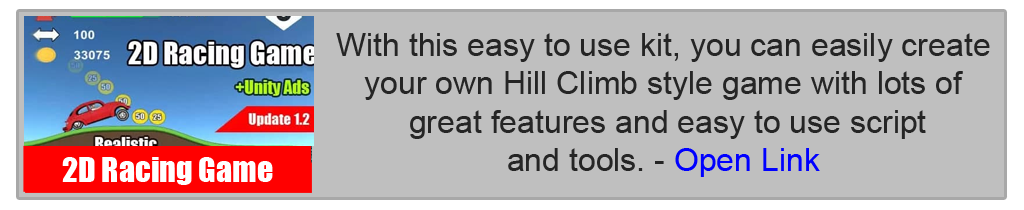
<style>
.page{position:relative;width:1024px;height:210px;background:#bfbfbf}
.page>*{position:absolute;margin:0}
.t1{font:32px "ArialMT";color:#252525}
.t2{font:32px "ArialMT";color:#0000ff}
.t3{font:32px "Impact";color:#ffffff}
</style>
<div class="page">
<p class="t1" style="left:336px;top:33px;width:654px;height:144px;text-align:center">With this easy to use kit, you can easily create<br> your own Hill Climb style game with lots of <br>great features and easy to use script <br>and tools. - <span class="t2">Open Link</span></p>
<p class="t3" style="left:62px;top:157px;width:211px;height:28px">2D Racing Game</p>
</div>
